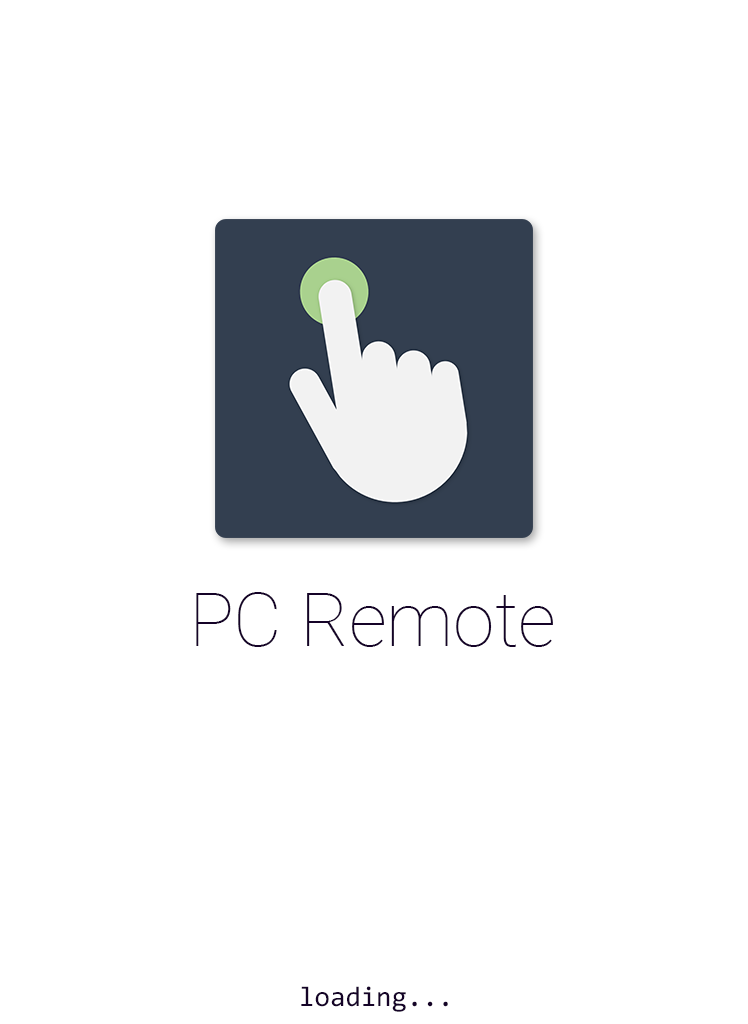
<style>
.page{position:relative;width:748px;height:1024px;background:#ffffff}
.page>*{position:absolute;margin:0}
.t1{font:74.8px "Roboto-Thin";color:#150328}
.t2{font:28.1px "Consolas";color:#150328}
</style>
<div class="page">
<p class="t1" style="left:196px;top:592px;width:357px;height:55px">PC Remote</p>
<p class="t2" style="left:301px;top:986px;width:147px;height:26px">loading...</p>
</div>
